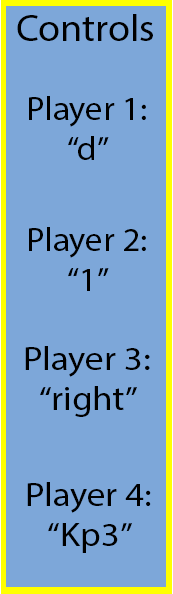
<style>
.page{position:relative;width:173px;height:594px;background:#7da7d9}
.page>*{position:absolute;margin:0}
.t1{font:37.5px "MyriadPro-Regular";color:#000000;scale:1.06 1}
.t2{font:33.3px "MyriadPro-Regular";color:#000000;scale:1.05 1}
.t3{font:33.3px "MyriadPro-Regular";color:#000000;scale:1.1 1}
</style>
<div class="page">
<p class="t1" style="left:17px;top:14px;width:136px;height:27px">Controls</p>
<p class="t2" style="left:29px;top:96px;width:117px;height:64px">Player 1:<br>“d”</p>
<p class="t2" style="left:29px;top:227px;width:117px;height:64px">Player 2:<br>“1”</p>
<p class="t3" style="left:25px;top:346px;width:125px;height:71px">Player 3:<br>“right”</p>
<p class="t3" style="left:27px;top:482px;width:124px;height:71px">Player 4:<br>“Kp3”</p>
</div>
